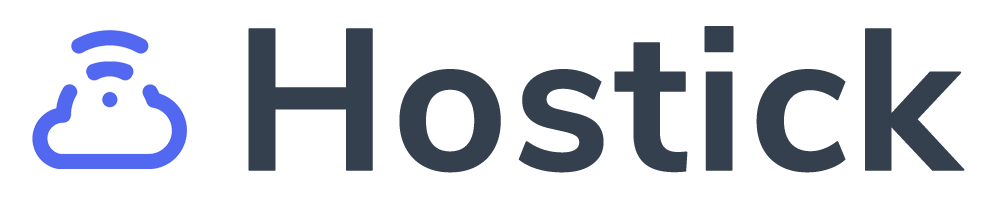
<style>
.page{position:relative;width:1000px;height:200px;background:#ffffff}
.page>*{position:absolute;margin:0}
.t1{font:200px "NunitoSans-Bold";color:#35404e;font-weight:bold}
</style>
<div class="page">
<p class="t1" style="left:248px;top:26px;width:717px;height:147px">Hostick</p>
</div>
